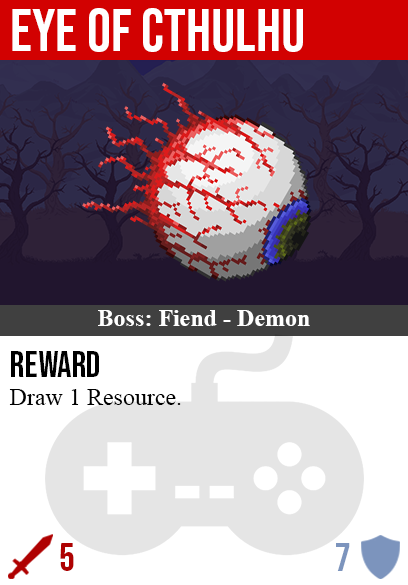
<style>
.page{position:relative;width:408px;height:585px;background:#ffffff}
.page>*{position:absolute;margin:0}
.t1{font:60px "BebasNeue-Regular";color:#ffffff}
.t2{font:24px "TimesNewRomanPS-BoldMT";color:#ffffff}
.t3{font:36px "BebasNeue-Regular";color:#000000}
.t4{font:24px "TimesNewRomanPSMT";color:#000000}
.t5{font:40px "BebasNeue-Regular";color:#af0202}
.t6{font:40px "BebasNeue-Regular";color:#7c94bd}
</style>
<div class="page">
<p class="t1" style="left:12px;top:8px;width:291px;height:44px">eye of cthulhu</p>
<p class="t2" style="left:98px;top:310px;width:212px;height:16px">Boss: Fiend - Demon</p>
<p class="t3" style="left:11px;top:351px;width:88px;height:26px">reward</p>
<p class="t4" style="left:9px;top:389px;width:172px;height:16px">Draw 1 Resource.</p>
<p class="t5" style="left:60px;top:543px;width:14px;height:28px">5</p>
<p class="t6" style="left:336px;top:543px;width:14px;height:28px">7</p>
</div>
